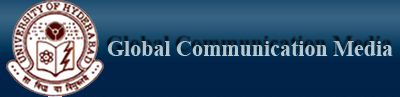
<style>
.page{position:relative;width:400px;height:97px;background:#012349}
.page>*{position:absolute;margin:0}
.t1{font:22px "TimesNewRomanPS-BoldMT";color:#b5c8d2}
.t2{font:12px "TimesNewRomanPSMT";color:#b5c8d2}
</style>
<div class="page">
<p class="t1" style="left:107px;top:41px;width:286px;height:15px"><span class="t2">  <br></span>Global Communication Media</p>
</div>
